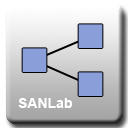
<style>
.page{position:relative;width:128px;height:128px}
.page>*{position:absolute;margin:0}
.t1{font:14px "Arial-BoldMT";color:#ffffff}
</style>
<div class="page">
<p class="t1" style="left:18px;top:98px;width:55px;height:10px">SANLab</p>
</div>
